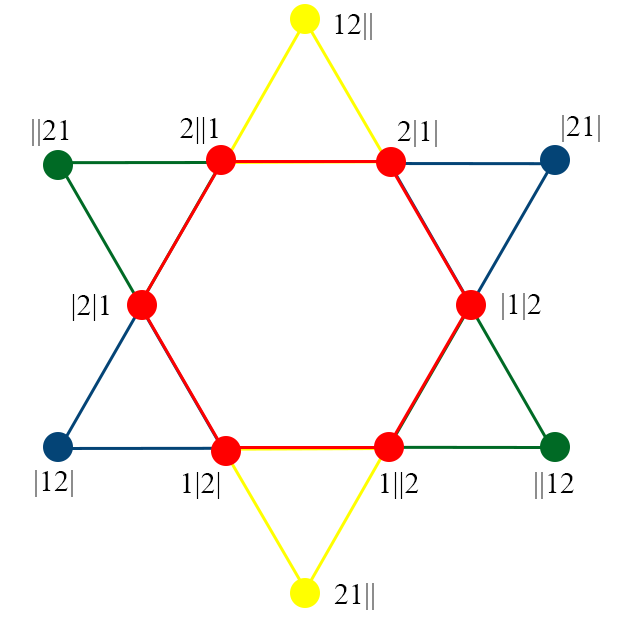
<style>
.page{position:relative;width:620px;height:620px;background:#ffffff}
.page>*{position:absolute;margin:0}
.t1{font:30px "TimesNewRomanPSMT";color:#000000}
</style>
<div class="page">
<p class="t1" style="left:335px;top:13px;width:37px;height:27px">12||</p>
<p class="t1" style="left:32px;top:119px;width:37px;height:27px">||21</p>
<p class="t1" style="left:180px;top:117px;width:38px;height:27px">2||1</p>
<p class="t1" style="left:397px;top:120px;width:40px;height:27px">2|1|</p>
<p class="t1" style="left:562px;top:115px;width:38px;height:27px">|21|</p>
<p class="t1" style="left:72px;top:294px;width:37px;height:27px">|2|1</p>
<p class="t1" style="left:502px;top:293px;width:39px;height:27px">|1|2</p>
<p class="t1" style="left:35px;top:470px;width:38px;height:27px">|12|</p>
<p class="t1" style="left:183px;top:472px;width:37px;height:27px">1|2|</p>
<p class="t1" style="left:381px;top:472px;width:38px;height:27px">1||2</p>
<p class="t1" style="left:535px;top:472px;width:39px;height:27px">||12</p>
<p class="t1" style="left:334px;top:583px;width:40px;height:27px">21||</p>
</div>
